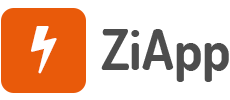
<style>
.page{position:relative;width:230px;height:100px;background:#ffffff}
.page>*{position:absolute;margin:0}
.t1{font:55px "Dosis-Bold";color:#4d4d4d}
</style>
<div class="page">
<p class="t1" style="left:101px;top:29px;width:128px;height:53px">ZiApp</p>
</div>
